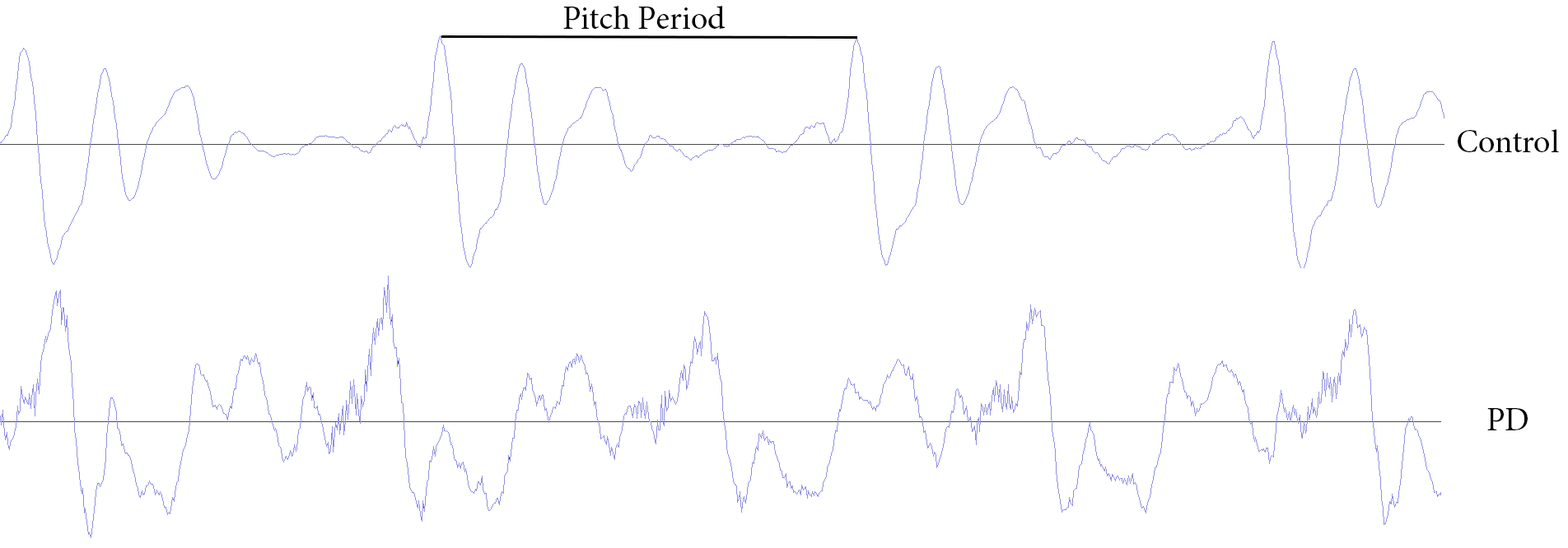
<style>
.page{position:relative;width:1568px;height:548px;background:#ffffff}
.page>*{position:absolute;margin:0}
.t1{font:32.9px "MinionPro-Regular";color:#000000}
</style>
<div class="page">
<p class="t1" style="left:563px;top:6px;width:162px;height:23px">Pitch Period</p>
<p class="t1" style="left:1458px;top:129px;width:101px;height:23px">Control</p>
<p class="t1" style="left:1487px;top:408px;width:41px;height:23px">PD</p>
</div>
